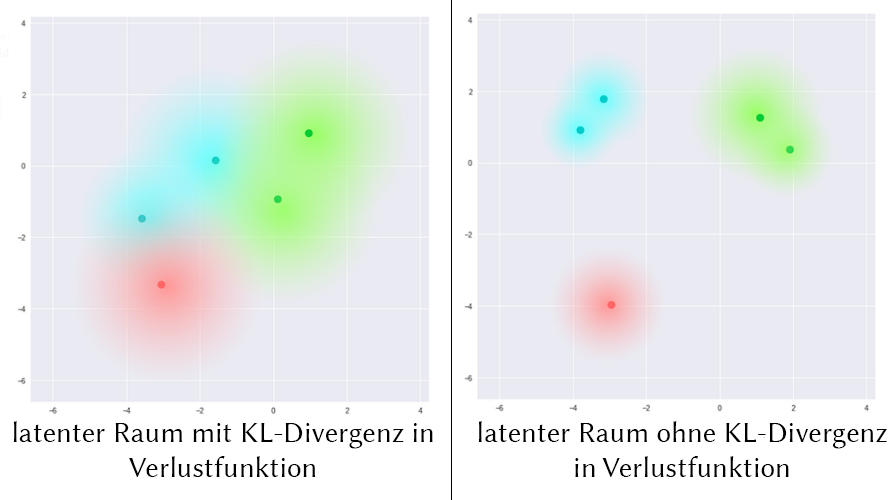
<style>
.page{position:relative;width:895px;height:500px;background:#eaeaf2}
.page>*{position:absolute;margin:0}
.t1{font:29.3px "LinuxBiolinumG";color:#000000}
</style>
<div class="page">
<p class="t1" style="left:13px;top:421px;width:420px;height:56px;text-align:center">latenter Raum mit KL-Divergenz in Verlustfunktion</p>
<p class="t1" style="left:478px;top:421px;width:409px;height:56px;text-align:center">latenter Raum ohne KL-Divergenz in Verlustfunktion</p>
</div>
